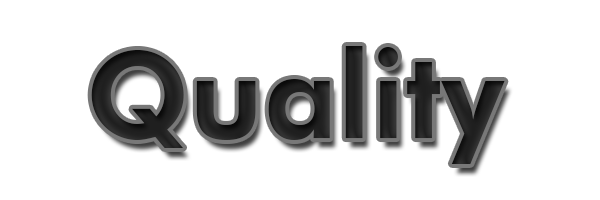
<style>
.page{position:relative;width:600px;height:200px;background:#ffffff}
.page>*{position:absolute;margin:0}
.t1{font:120px "FuturaBT-Heavy";color:#212121}
</style>
<div class="page">
<p class="t1" style="left:91px;top:46px;width:414px;height:118px">Quality</p>
</div>
